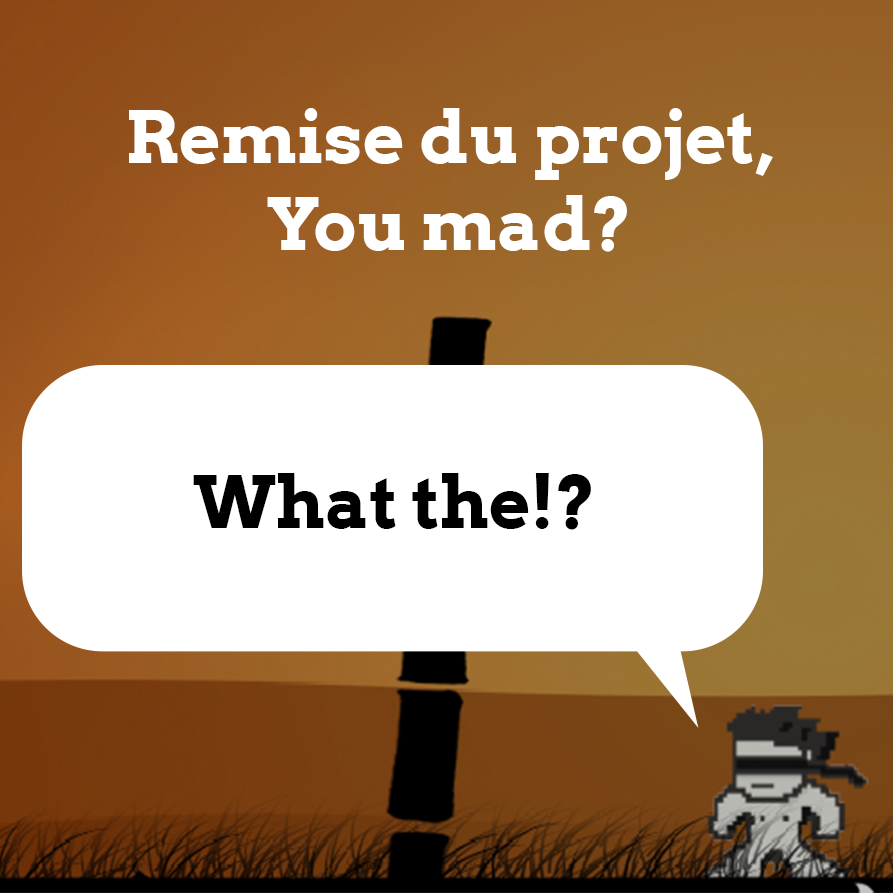
<style>
.page{position:relative;width:893px;height:893px;background:#ffffff}
.page>*{position:absolute;margin:0}
.t1{font:72px "Arvo-Bold";color:#ffffff}
.t2{font:72px "Arvo-Bold";color:#000000}
</style>
<div class="page">
<p class="t1" style="left:129px;top:108px;width:644px;height:144px;text-align:center">Remise du projet, You mad?</p>
<p class="t2" style="left:193px;top:473px;width:398px;height:57px">What the!?</p>
</div>
